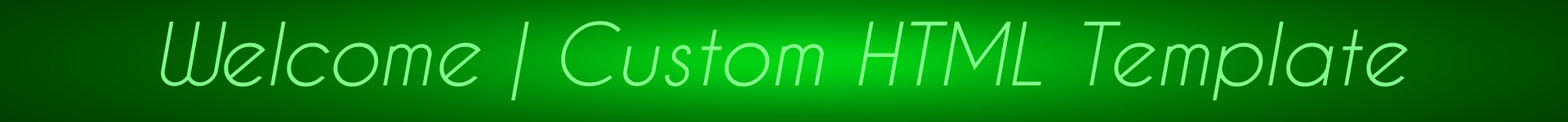
<style>
.page{position:relative;width:1568px;height:122px}
.page>*{position:absolute;margin:0}
.t1{font:81.7px "CaviarDreams-Italic";color:#81fe8a}
</style>
<div class="page">
<p class="t1" style="left:161px;top:21px;width:1247px;height:80px">Welcome | Custom HTML Template</p>
</div>
